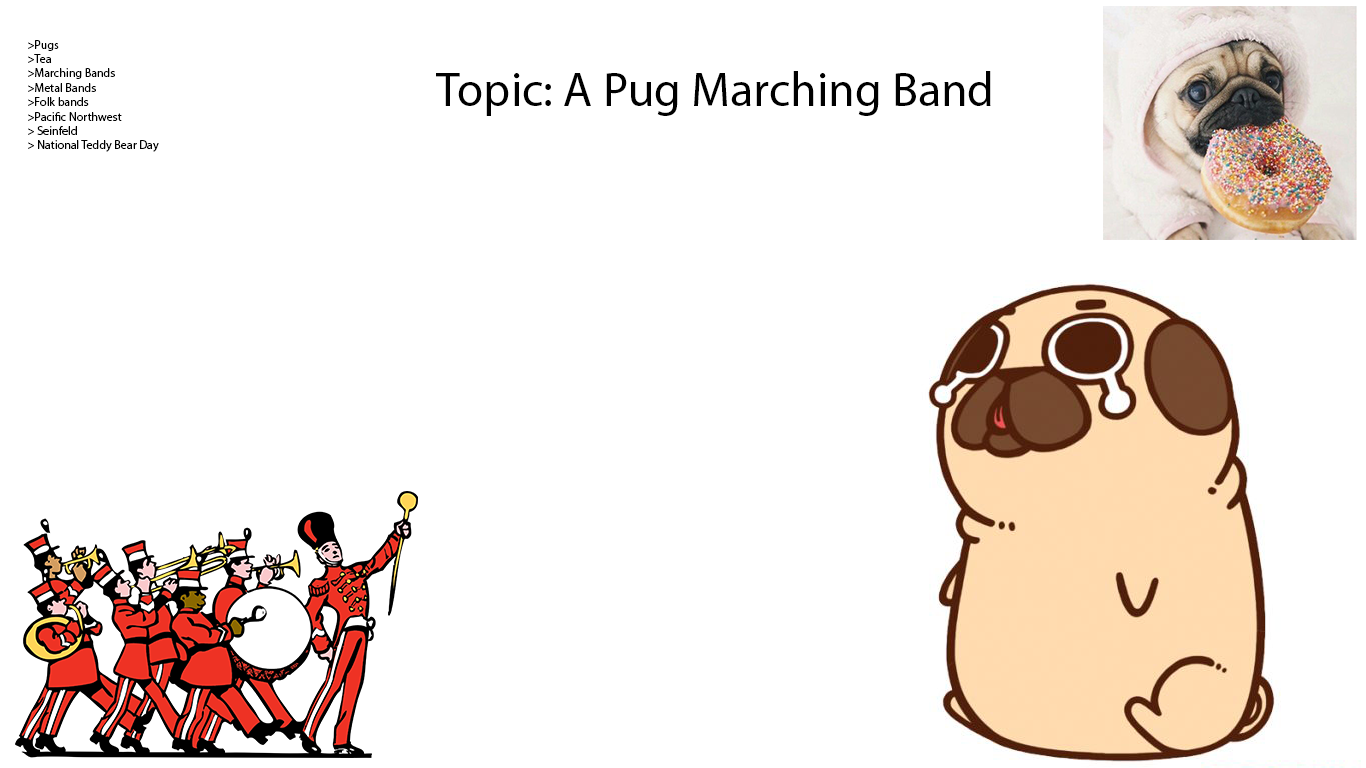
<style>
.page{position:relative;width:1366px;height:768px;background:#ffffff}
.page>*{position:absolute;margin:0}
.t1{font:12px "MyriadPro-Regular";color:#000000}
.t2{font:48px "MyriadPro-Regular";color:#000000}
</style>
<div class="page">
<p class="t1" style="left:28px;top:40px;width:131px;height:112px">&gt;Pugs<br>&gt;Tea<br>&gt;Marching Bands<br>&gt;Metal Bands<br>&gt;Folk bands<br>&gt;Pacific Northwest<br>&gt; Seinfeld<br>&gt; National Teddy Bear Day</p>
<p class="t2" style="left:436px;top:71px;width:555px;height:45px">Topic: A Pug Marching Band</p>
</div>
